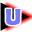
<style>
.page{position:relative;width:32px;height:32px;background:#ffffff}
.page>*{position:absolute;margin:0}
.t1{font:24px "BerlinSansFBDemi-Bold";color:#7676ff}
</style>
<div class="page">
<p class="t1" style="left:6px;top:9px;width:15px;height:16px">U</p>
</div>
